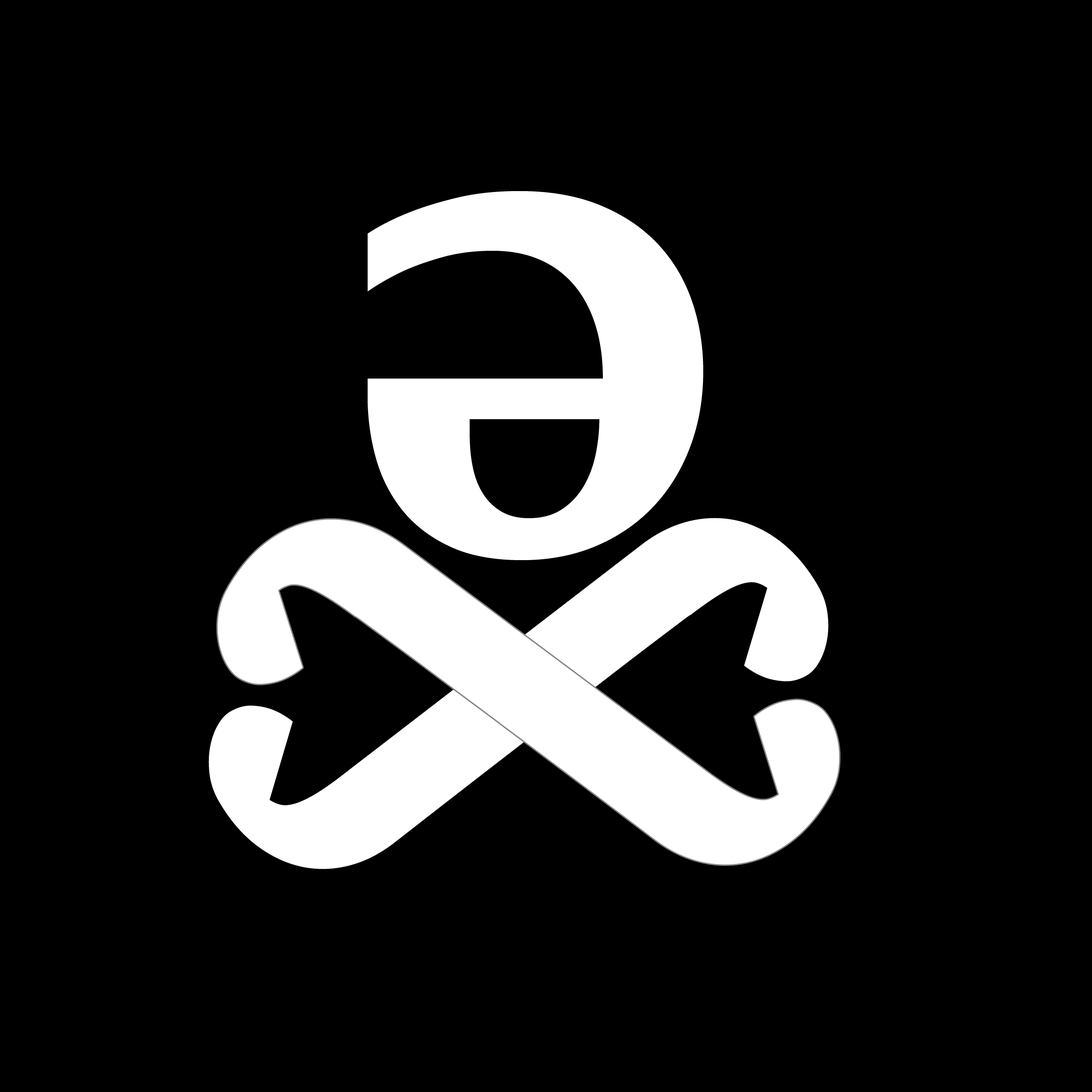
<style>
.page{position:relative;width:1092px;height:1092px;background:#000000}
.page>*{position:absolute;margin:0}
.t1{font:720.4px "CharisSIL-Bold";color:#ffffff}
.t2{font:644.6px "CharisSIL-Bold";color:#ffffff}
</style>
<div class="page">
<p class="t1" style="left:368px;top:191px;width:335px;height:369px">ə</p>
<p class="t2" style="left:208px;top:518px;width:621px;height:351px;rotate:60deg">ʃ</p>
<p class="t2" style="left:217px;top:520px;width:622px;height:344px;rotate:119deg">ʃ</p>
</div>
